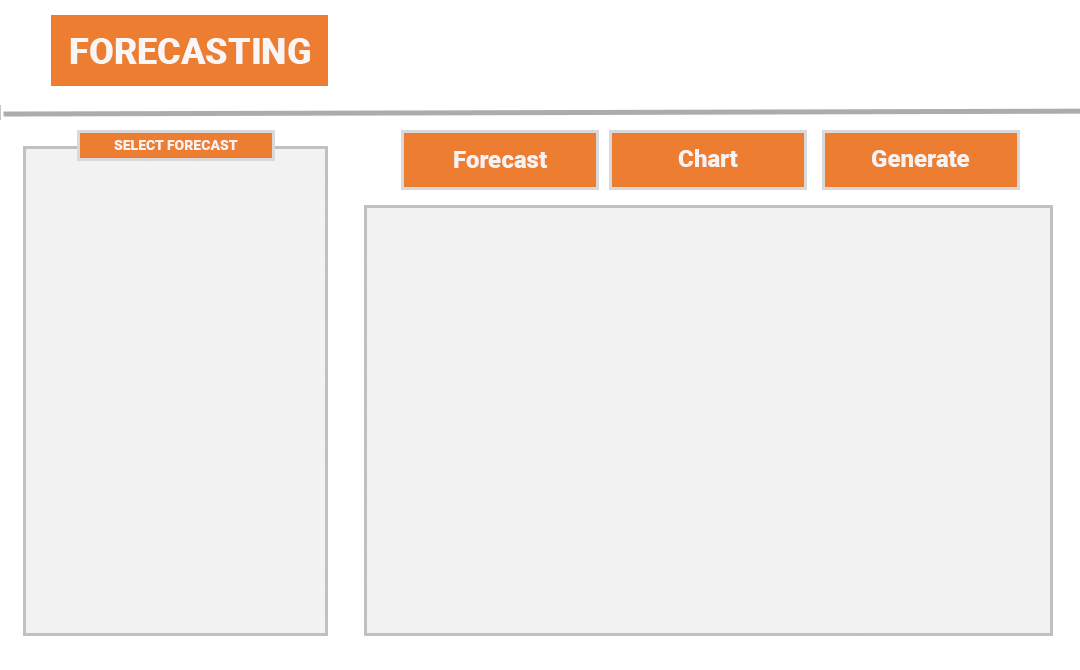
<style>
.page{position:relative;width:1080px;height:670px;background:#f2f2f2}
.page>*{position:absolute;margin:0}
.t1{font:14px "Roboto-Black";color:#f7f2f2}
.t2{font:24px "Roboto-Black";color:#f7f2f2}
</style>
<div class="page">
<p class="t1" style="left:114px;top:140px;width:124px;height:10px">SELECT FORECAST</p>
<p class="t2" style="left:678px;top:149px;width:60px;height:18px">Chart</p>
<p class="t2" style="left:872px;top:150px;width:98px;height:17px">Generate</p>
<p class="t2" style="left:454px;top:151px;width:93px;height:17px">Forecast</p>
</div>
